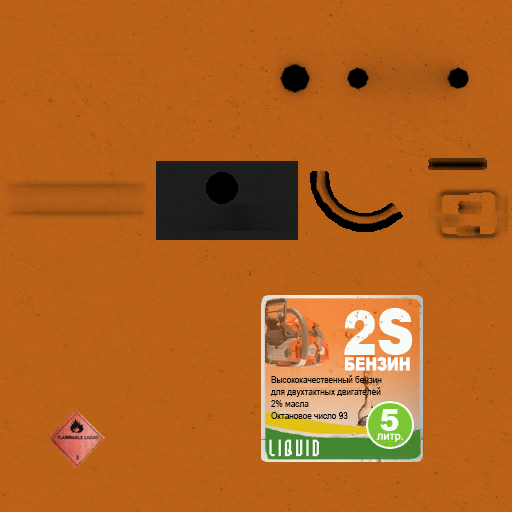
<style>
.page{position:relative;width:512px;height:512px;background:#bb6118}
.page>*{position:absolute;margin:0}
.t1{font:18px "Arial-Black";color:#ffffff;scale:0.79 1}
.t2{font:10px "ArialNarrow";color:#000000}
.t3{font:11px "ArialMT";color:#ffffff}
</style>
<div class="page">
<p class="t1" style="left:345px;top:357px;width:65px;height:14px">БЕНЗИН</p>
<p class="t2" style="left:270px;top:375px;width:112px;height:44px">Высококачественный бензин<br>для двухтактных двигателей<br>2% масла<br>Октановое число 93</p>
<p class="t3" style="left:377px;top:433px;width:26px;height:9px">литр.</p>
</div>
